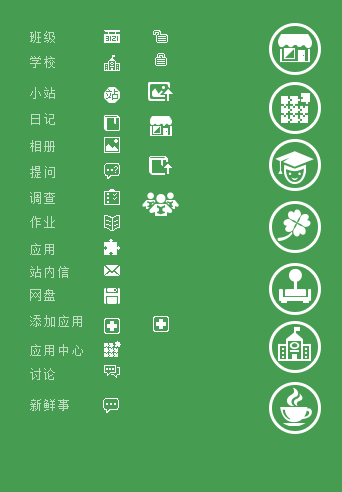
<style>
.page{position:relative;width:342px;height:492px;background:#469c51}
.page>*{position:absolute;margin:0}
.t1{font:12px "SimSun";letter-spacing:0.18em;color:#c0dec2}
</style>
<div class="page">
<p class="t1" style="left:30px;top:31px;width:25px;height:12px">班级</p>
<p class="t1" style="left:30px;top:56px;width:25px;height:12px">学校</p>
<p class="t1" style="left:30px;top:87px;width:25px;height:12px">小站</p>
<p class="t1" style="left:31px;top:113px;width:24px;height:12px">日记</p>
<p class="t1" style="left:30px;top:140px;width:25px;height:12px">相册</p>
<p class="t1" style="left:30px;top:166px;width:25px;height:12px">提问</p>
<p class="t1" style="left:30px;top:192px;width:25px;height:12px">调查</p>
<p class="t1" style="left:30px;top:216px;width:25px;height:12px">作业</p>
<p class="t1" style="left:30px;top:243px;width:24px;height:12px">应用</p>
<p class="t1" style="left:30px;top:266px;width:39px;height:12px">站内信</p>
<p class="t1" style="left:30px;top:289px;width:25px;height:12px">网盘</p>
<p class="t1" style="left:30px;top:315px;width:52px;height:12px">添加应用</p>
<p class="t1" style="left:30px;top:344px;width:53px;height:12px">应用中心</p>
<p class="t1" style="left:30px;top:368px;width:25px;height:12px">讨论</p>
<p class="t1" style="left:30px;top:399px;width:39px;height:12px">新鲜事</p>
</div>
